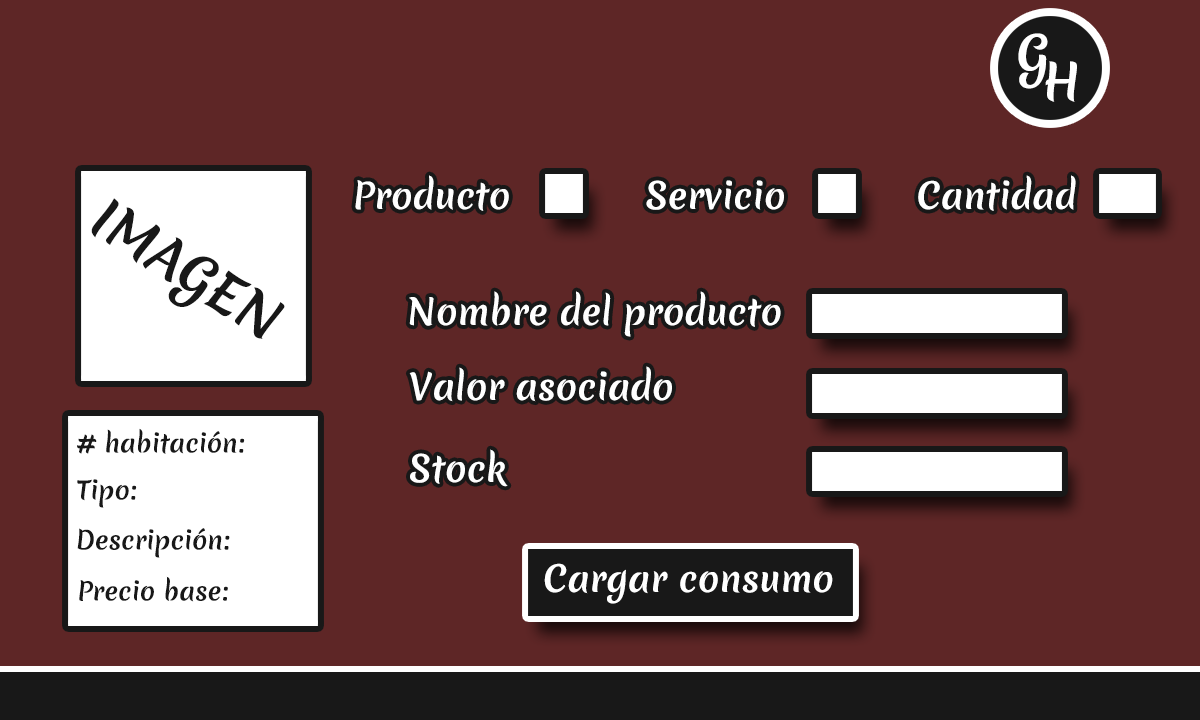
<style>
.page{position:relative;width:1200px;height:720px;background:#5e2626}
.page>*{position:absolute;margin:0}
.t1{font:48.4px "MeriendaOne-Regular";color:#ffffff}
.t2{font:35.1px "MeriendaOne-Regular";color:#ffffff}
.t3{font:51.9px "MeriendaOne-Regular";color:#181818}
.t4{font:24.6px "MeriendaOne-Regular";color:#181818}
</style>
<div class="page">
<p class="t1" style="left:1018px;top:33px;width:30px;height:56px">G</p>
<p class="t1" style="left:1045px;top:61px;width:32px;height:41px">H</p>
<p class="t2" style="left:355px;top:175px;width:154px;height:36px">Producto</p>
<p class="t2" style="left:646px;top:180px;width:138px;height:30px">Servicio</p>
<p class="t2" style="left:918px;top:175px;width:158px;height:36px">Cantidad</p>
<p class="t3" style="left:91px;top:198px;width:194px;height:141px;rotate:32deg">IMAGEN</p>
<p class="t2" style="left:409px;top:291px;width:372px;height:46px">Nombre del producto</p>
<p class="t2" style="left:409px;top:366px;width:263px;height:36px">Valor asociado</p>
<p class="t4" style="left:77px;top:428px;width:168px;height:26px"># habitación:</p>
<p class="t2" style="left:410px;top:449px;width:98px;height:38px">Stock</p>
<p class="t4" style="left:77px;top:479px;width:60px;height:29px">Tipo:</p>
<p class="t4" style="left:77px;top:528px;width:153px;height:30px">Descripción:</p>
<p class="t2" style="left:544px;top:563px;width:289px;height:41px">Cargar consumo</p>
<p class="t4" style="left:79px;top:576px;width:149px;height:26px">Precio base:</p>
</div>
